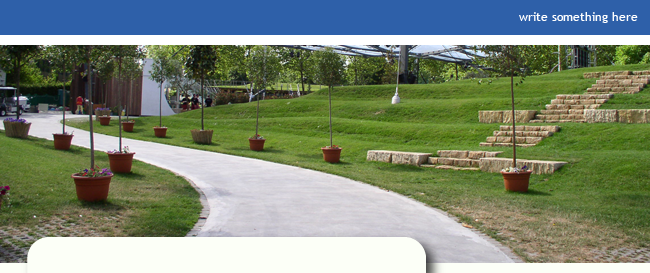
<style>
.page{position:relative;width:650px;height:273px}
.page>*{position:absolute;margin:0}
.t1{font:12px "TrebuchetMS";color:#ffffff}
</style>
<div class="page">
<p class="t1" style="left:519px;top:12px;width:119px;height:11px">write something here</p>
</div>
